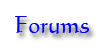
<style>
.page{position:relative;width:100px;height:50px;background:#ffffff}
.page>*{position:absolute;margin:0}
.t1{font:24px "Calligraphic421BT-RomanB";color:#0000ff}
</style>
<div class="page">
<p class="t1" style="left:15px;top:16px;width:75px;height:18px">Forums</p>
</div>
